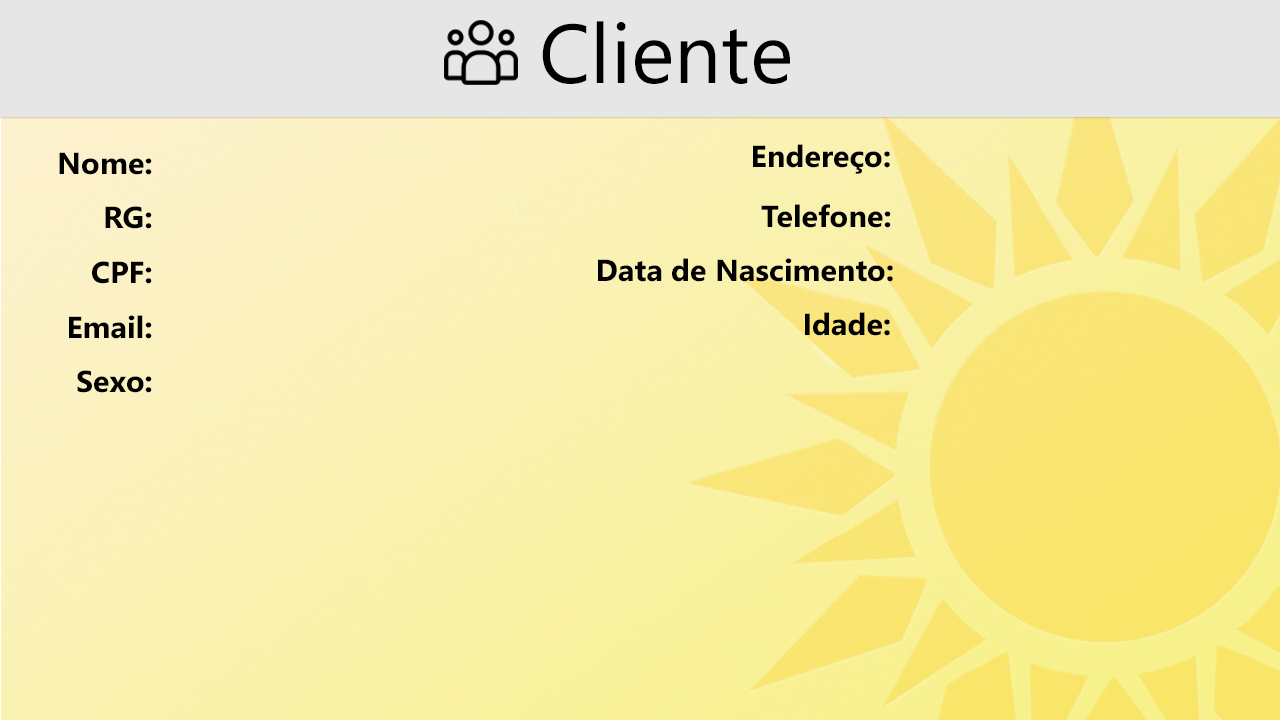
<style>
.page{position:relative;width:1280px;height:720px}
.page>*{position:absolute;margin:0}
.t1{font:83.3px "SegoeUI";color:#000000}
.t2{font:30.6px "SegoeUI-Bold";color:#000000}
</style>
<div class="page">
<p class="t1" style="left:542px;top:21px;width:248px;height:63px">Cliente</p>
<p class="t2" style="left:753px;top:144px;width:137px;height:30px">Endereço:</p>
<p class="t2" style="left:59px;top:152px;width:93px;height:23px">Nome:</p>
<p class="t2" style="left:105px;top:206px;width:47px;height:23px">RG:</p>
<p class="t2" style="left:761px;top:204px;width:130px;height:24px">Telefone:</p>
<p class="t2" style="left:92px;top:261px;width:60px;height:23px">CPF:</p>
<p class="t2" style="left:598px;top:258px;width:295px;height:24px">Data de Nascimento:</p>
<p class="t2" style="left:69px;top:315px;width:83px;height:24px">Email:</p>
<p class="t2" style="left:805px;top:312px;width:85px;height:24px">Idade:</p>
<p class="t2" style="left:77px;top:370px;width:75px;height:23px">Sexo:</p>
</div>
